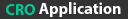
<style>
.page{position:relative;width:128px;height:19px;background:#333333}
.page>*{position:absolute;margin:0}
.t1{font:16px "MyriadPro-Bold";color:#00c796}
.t2{font:16px "MyriadPro-Bold";color:#ffffff}
</style>
<div class="page">
<p class="t1" style="left:6px;top:4px;width:29px;height:11px">CRO</p>
<p class="t2" style="left:39px;top:2px;width:82px;height:15px">Application</p>
</div>
